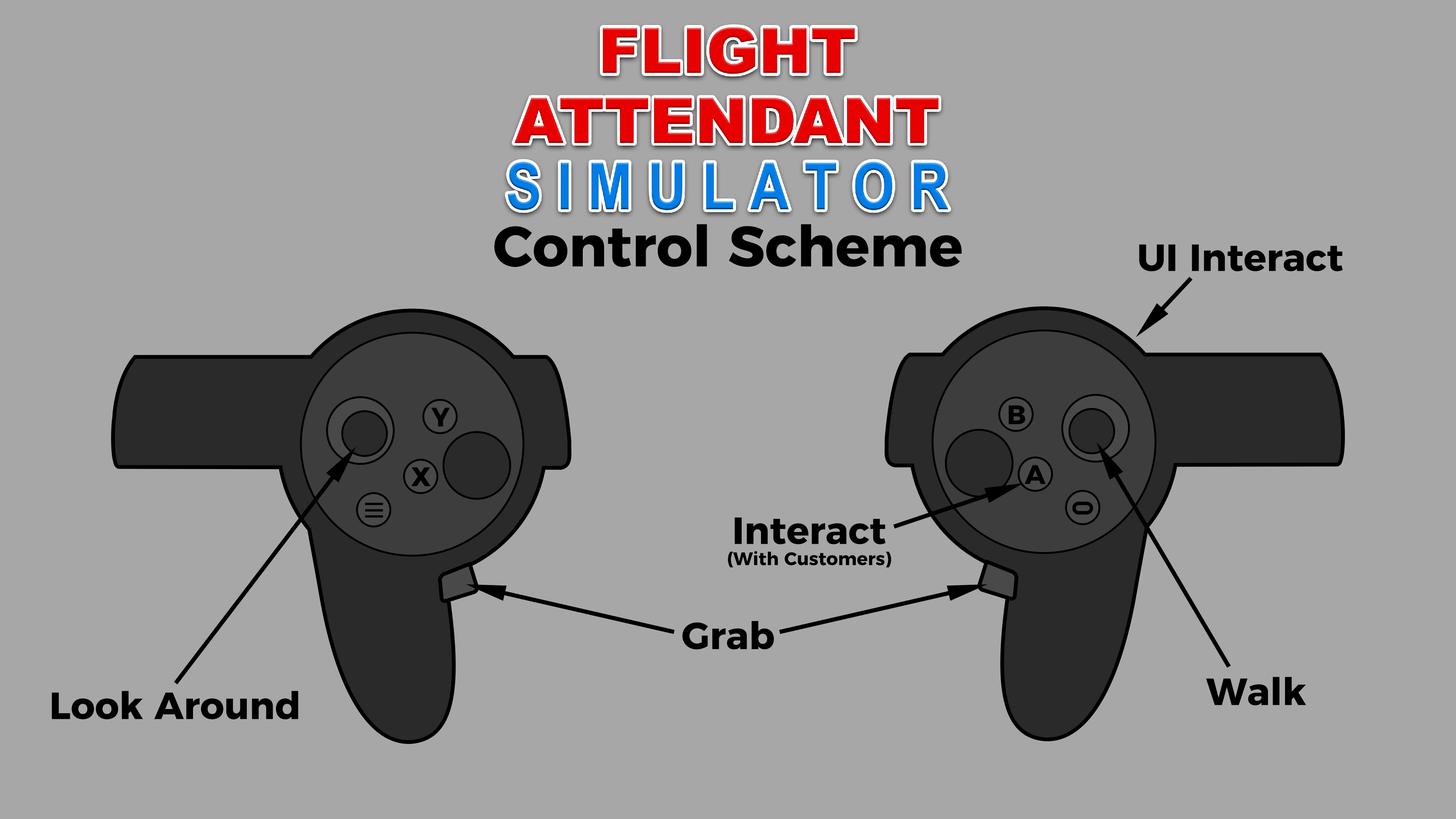
<style>
.page{position:relative;width:1456px;height:819px;background:#a7a7a7}
.page>*{position:absolute;margin:0}
.t1{font:56.9px "Montserrat-Bold";color:#000000}
.t2{font:37.9px "Montserrat-Bold";color:#000000}
.t3{font:26.7px "Montserrat-Bold";color:#000000}
.t4{font:18.2px/37.9px "Montserrat-Bold";color:#000000}
.t5{font:37.9px/37.9px "Montserrat-Bold";color:#000000}
</style>
<div class="page">
<p class="t1" style="left:494px;top:224px;width:468px;height:43px">Control Scheme</p>
<p class="t2" style="left:1139px;top:244px;width:204px;height:27px">UI Interact</p>
<p class="t3" style="left:431px;top:408px;width:19px;height:19px">Y</p>
<p class="t3" style="left:1009px;top:405px;width:16px;height:19px">B</p>
<p class="t3" style="left:411px;top:467px;width:20px;height:19px">X</p>
<p class="t3" style="left:1024px;top:465px;width:22px;height:19px;rotate:180deg">A</p>
<p class="t4" style="left:728px;top:517px;width:163px;height:51px;text-align:center"><span class="t5">Interact<br></span>(With Customers)</p>
<p class="t2" style="left:682px;top:621px;width:92px;height:29px">Grab</p>
<p class="t2" style="left:1206px;top:677px;width:100px;height:29px">Walk</p>
<p class="t2" style="left:52px;top:691px;width:246px;height:29px">Look Around</p>
</div>
